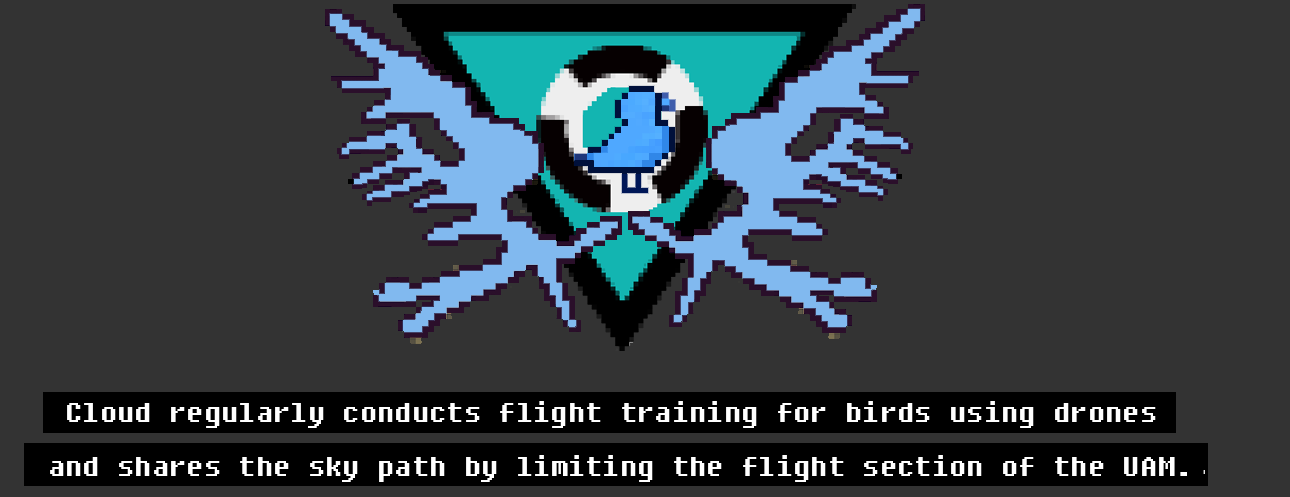
<style>
.page{position:relative;width:1290px;height:497px;background:#333333}
.page>*{position:absolute;margin:0}
.t1{font:34.7px/53.3px "DungGeunMo";color:#ffffff}
</style>
<div class="page">
<p class="t1" style="left:50px;top:401px;width:1137px;height:81px;text-align:center">Cloud regularly conducts flight training for birds using drones <br>and shares the sky path by limiting the flight section of the UAM.</p>
</div>
